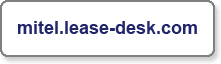
<style>
.page{position:relative;width:221px;height:64px;background:#ffffff}
.page>*{position:absolute;margin:0}
.t1{font:18px "Arial-BoldMT";color:#22266b}
</style>
<div class="page">
<p class="t1" style="left:18px;top:21px;width:179px;height:13px">mitel.lease-desk.com</p>
</div>
